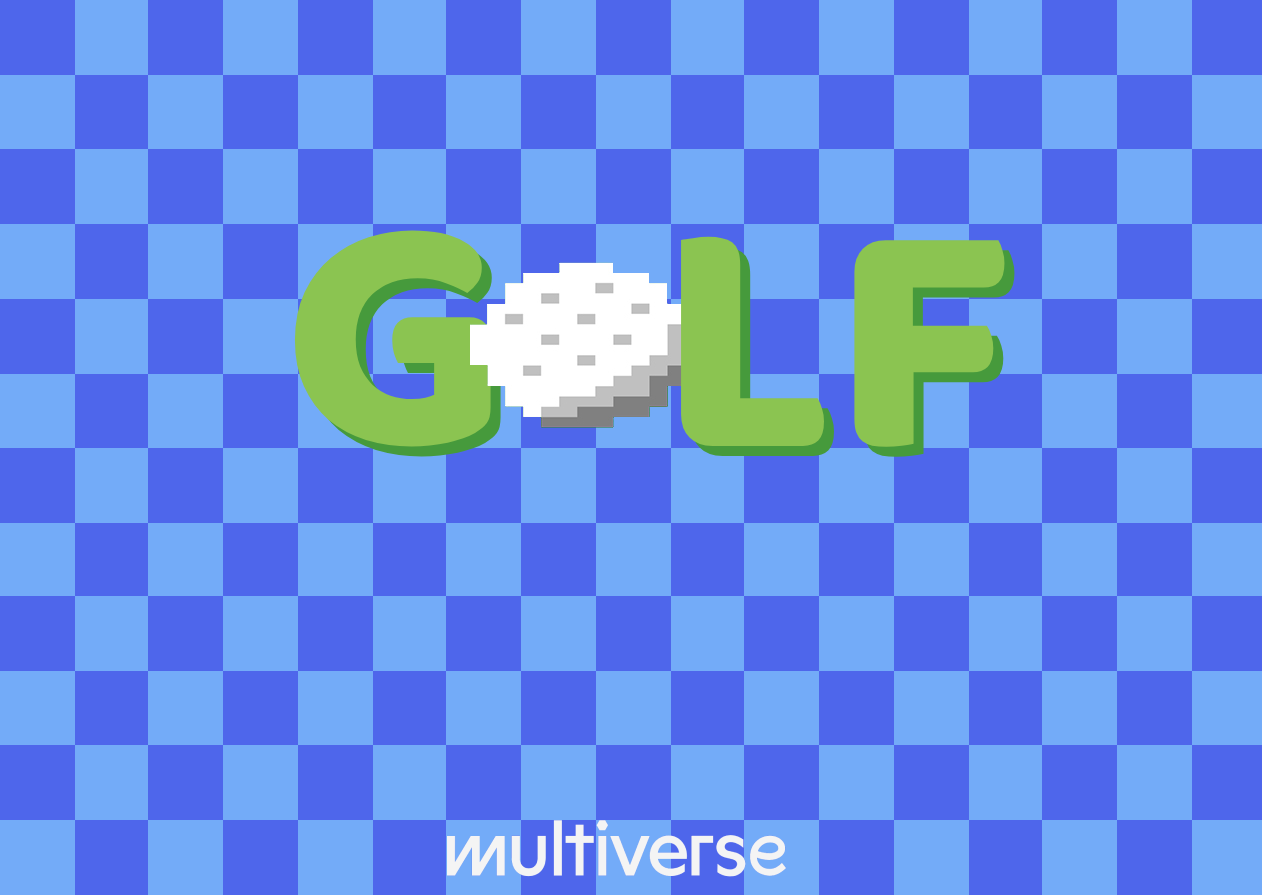
<style>
.page{position:relative;width:1262px;height:895px;background:#73abf8}
.page>*{position:absolute;margin:0}
.t1{font:337.9px "Baloo";color:#8bc451}
</style>
<div class="page">
<p class="t1" style="left:294px;top:230px;width:197px;height:217px">G</p>
<p class="t1" style="left:681px;top:236px;width:324px;height:211px">LF</p>
</div>
